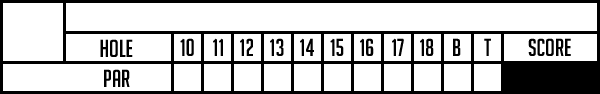
<style>
.page{position:relative;width:600px;height:94px;background:#ffffff}
.page>*{position:absolute;margin:0}
.t1{font:24px "BigNoodleTitling";color:#000000}
</style>
<div class="page">
<p class="t1" style="left:100px;top:39px;width:33px;height:18px">Hole</p>
<p class="t1" style="left:180px;top:38px;width:14px;height:18px">10</p>
<p class="t1" style="left:213px;top:38px;width:10px;height:18px">11</p>
<p class="t1" style="left:240px;top:38px;width:13px;height:18px">12</p>
<p class="t1" style="left:270px;top:38px;width:14px;height:18px">13</p>
<p class="t1" style="left:300px;top:38px;width:14px;height:18px">14</p>
<p class="t1" style="left:330px;top:38px;width:14px;height:18px">15</p>
<p class="t1" style="left:360px;top:38px;width:14px;height:18px">16</p>
<p class="t1" style="left:392px;top:38px;width:12px;height:18px">17</p>
<p class="t1" style="left:420px;top:38px;width:14px;height:18px">18</p>
<p class="t1" style="left:453px;top:38px;width:8px;height:18px">B</p>
<p class="t1" style="left:484px;top:38px;width:7px;height:18px">t</p>
<p class="t1" style="left:528px;top:38px;width:43px;height:18px">score</p>
<p class="t1" style="left:104px;top:69px;width:26px;height:18px">par</p>
</div>
